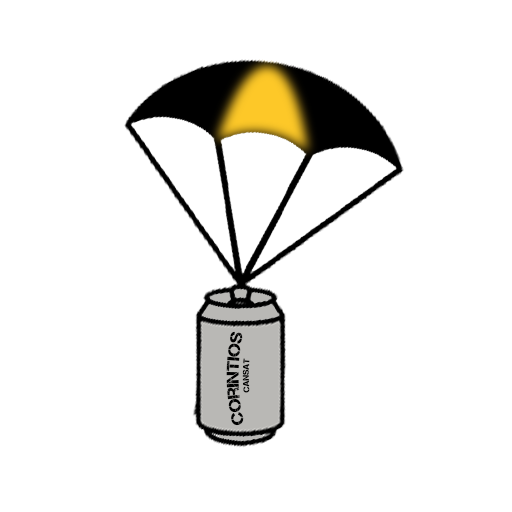
<style>
.page{position:relative;width:512px;height:512px;background:#ffffff}
.page>*{position:absolute;margin:0}
.t1{font:17px "Captureit";color:#000000;scale:1.03 1}
.t2{font:8.5px "Captureit";color:#000000;scale:1.03 1}
</style>
<div class="page">
<p class="t1" style="left:226px;top:331px;width:24px;height:95px;text-align:center;rotate:-90deg">Corintios <br><span class="t2">cansat</span></p>
</div>
